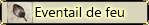
<style>
.page{position:relative;width:149px;height:25px;background:#d9d5bd}
.page>*{position:absolute;margin:0}
.t1{font:14px "LaoUI";color:#000000}
</style>
<div class="page">
<p class="t1" style="left:35px;top:7px;width:89px;height:10px">Eventail de feu</p>
</div>
